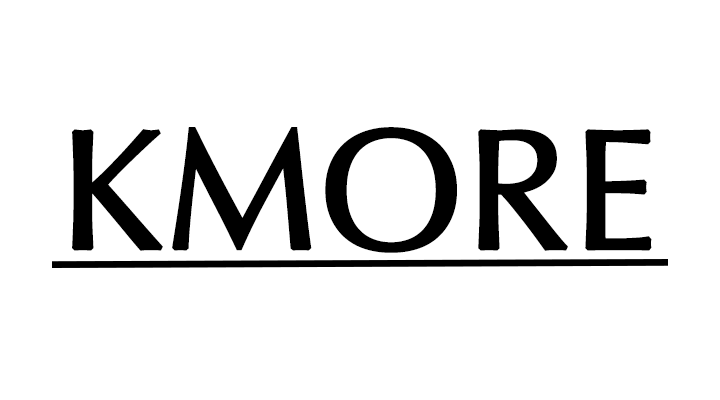
<style>
.page{position:relative;width:720px;height:400px;background:#ffffff}
.page>*{position:absolute;margin:0}
.t1{font:169.6px "Optima-Regular";letter-spacing:-0.006em;color:#000000;font-weight:bold}
</style>
<div class="page">
<p class="t1" style="left:72px;top:127px;width:580px;height:126px">KMORE</p>
</div>
